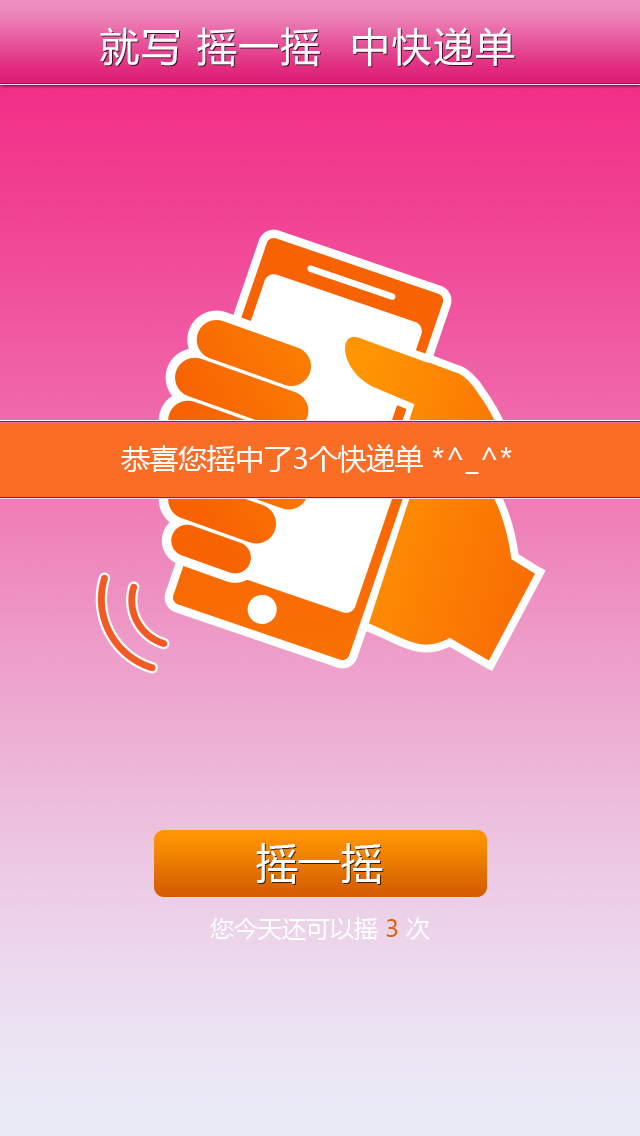
<style>
.page{position:relative;width:640px;height:1136px}
.page>*{position:absolute;margin:0}
.t1{font:39.8px "MicrosoftYaHei";letter-spacing:0.05em;color:#ffffff}
.t2{font:28.5px "MicrosoftYaHei";color:#ffffff}
.t3{font:42.5px "MicrosoftYaHei";color:#ffffff}
.t4{font:24px "MicrosoftYaHei";color:#ffffff}
.t5{font:24px "MicrosoftYaHei";color:#d86300}
</style>
<div class="page">
<p class="t1" style="left:100px;top:27px;width:415px;height:40px">就写 摇一摇  中快递单</p>
<p class="t2" style="left:121px;top:444px;width:391px;height:30px">恭喜您摇中了3个快递单 *^_^*</p>
<p class="t3" style="left:256px;top:843px;width:127px;height:41px">摇一摇</p>
<p class="t4" style="left:210px;top:917px;width:220px;height:23px">您今天还可以摇 <span class="t5">3</span> 次</p>
</div>
